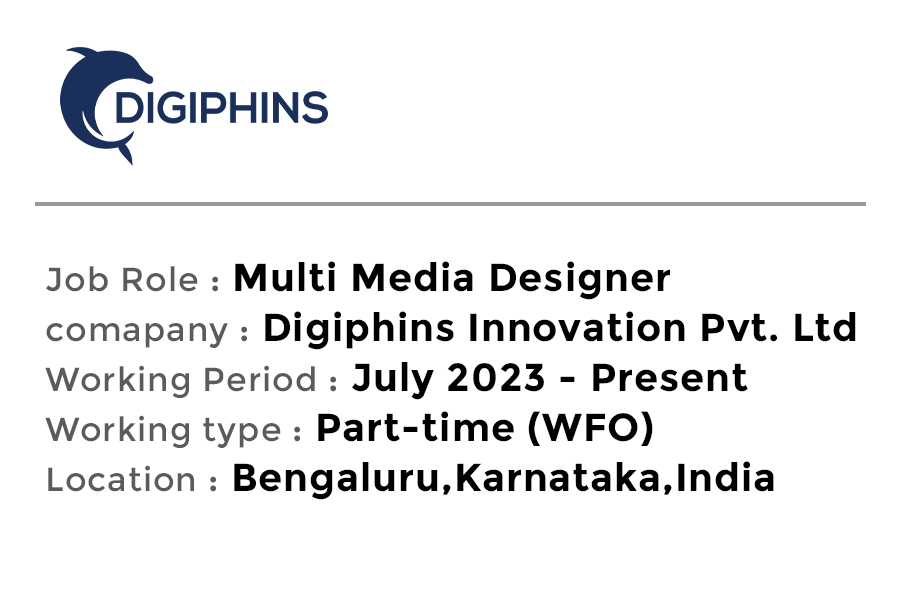
<style>
.page{position:relative;width:900px;height:600px;background:#ffffff}
.page>*{position:absolute;margin:0}
.t1{font:38.9px/50px "Montserrat-Bold";letter-spacing:0.025em;color:#000000}
.t2{font:33.3px/50px "Montserrat-Regular";letter-spacing:0.025em;color:#5c5b5b}
.t3{font:33.3px/50px "Montserrat-Bold";letter-spacing:0.025em;color:#5c5b5b}
</style>
<div class="page">
<p class="t1" style="left:45px;top:261px;width:811px;height:239px"><span class="t2">Job Role </span><span class="t3">:</span> Multi Media Designer<br><span class="t2">comapany </span><span class="t3">:</span> Digiphins Innovation Pvt. Ltd<br><span class="t2">Working Period </span><span class="t3">:</span> July 2023 - Present<br><span class="t2">Working type </span><span class="t3">:</span> Part-time (WFO)<br><span class="t2">Location </span><span class="t3">:</span> Bengaluru,Karnataka,India</p>
</div>
